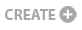
<style>
.page{position:relative;width:82px;height:30px;background:#ffffff}
.page>*{position:absolute;margin:0}
.t1{font:15.2px "MyriadPro-Bold";color:#a6a6a6}
</style>
<div class="page">
<p class="t1" style="left:5px;top:9px;width:51px;height:11px">CREATE</p>
</div>
